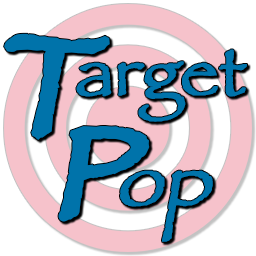
<style>
.page{position:relative;width:256px;height:256px;background:#ffffff}
.page>*{position:absolute;margin:0}
.t1{font:141.9px "Papyrus";color:#0073aa;font-weight:bold;font-style:italic}
.t2{font:70px "Papyrus";color:#0073aa;font-weight:bold}
.t3{font:128.9px "Papyrus";color:#0073aa;font-weight:bold;font-style:italic}
.t4{font:75px "Papyrus";color:#0073aa;font-weight:bold;font-style:italic}
</style>
<div class="page">
<p class="t1" style="left:4px;top:33px;width:106px;height:107px">T</p>
<p class="t2" style="left:76px;top:49px;width:171px;height:73px">arget</p>
<p class="t3" style="left:58px;top:126px;width:92px;height:96px">P</p>
<p class="t4" style="left:120px;top:170px;width:93px;height:72px">op</p>
</div>
